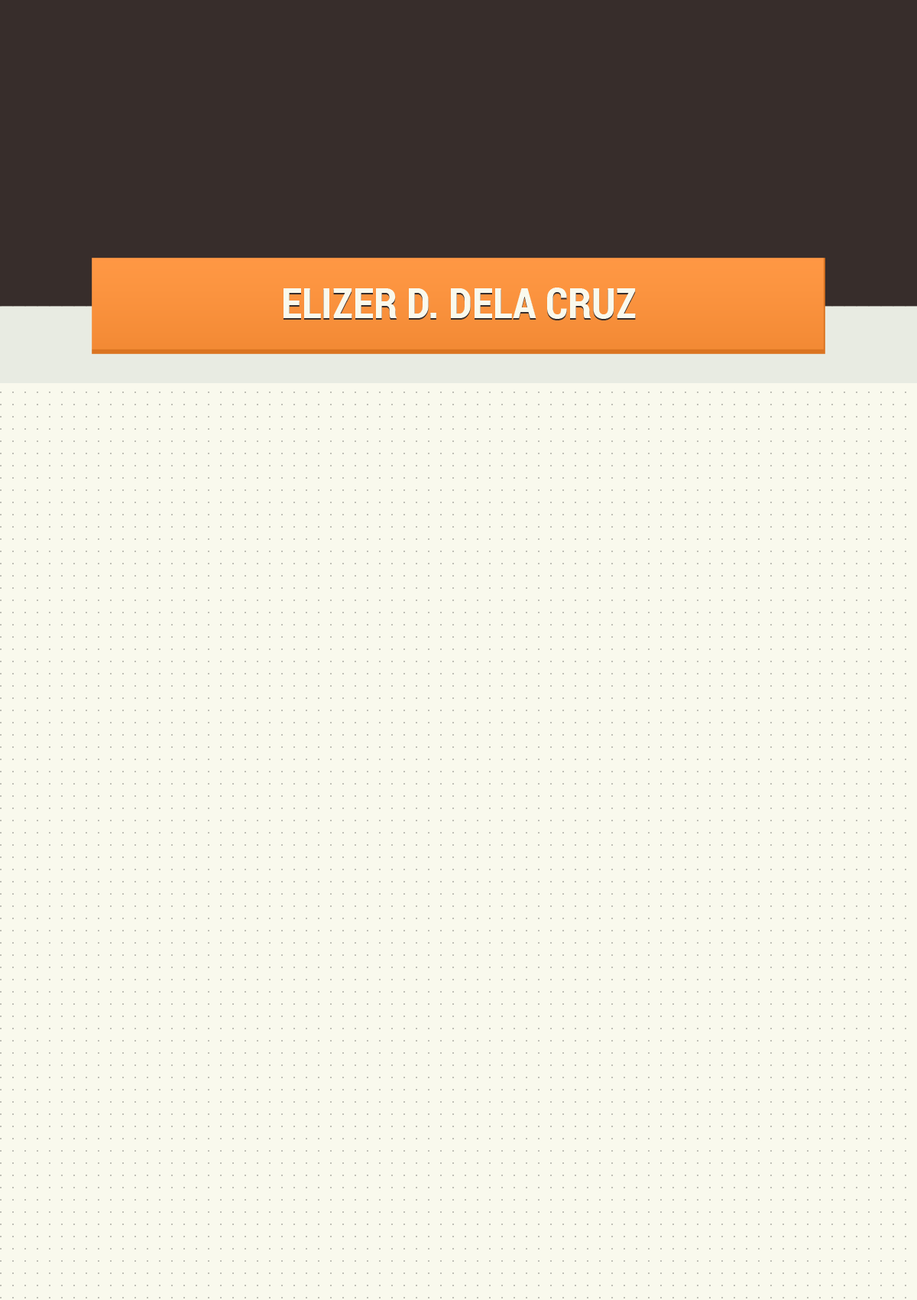
<style>
.page{position:relative;width:917px;height:1300px;background:#f9f9ed}
.page>*{position:absolute;margin:0}
.t1{font:42px "RobotoCondensed-Bold";color:#f9f9ed}
</style>
<div class="page">
<p class="t1" style="left:284px;top:287px;width:352px;height:32px">ELIZER D. DELA CRUZ</p>
</div>
